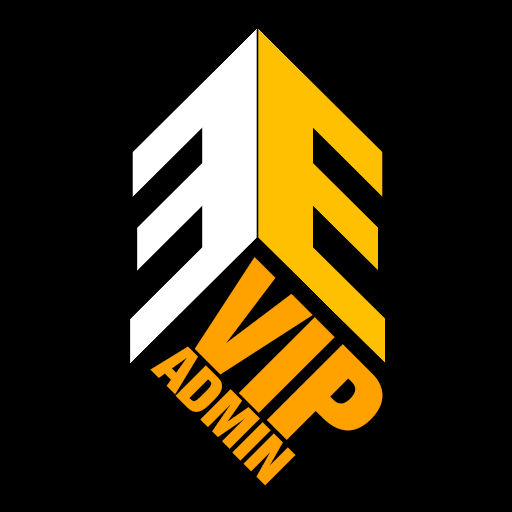
<style>
.page{position:relative;width:512px;height:512px;background:#000000}
.page>*{position:absolute;margin:0}
.t1{font:150px "HelveticaNeue-CondensedBlack";color:#ffa200}
.t2{font:60px "HelveticaNeue-CondensedBlack";color:#ffa200}
</style>
<div class="page">
<p class="t1" style="left:194px;top:257px;width:189px;height:183px;rotate:45deg">VIP</p>
<p class="t2" style="left:150px;top:346px;width:146px;height:140px;rotate:45deg">ADMIN</p>
</div>
